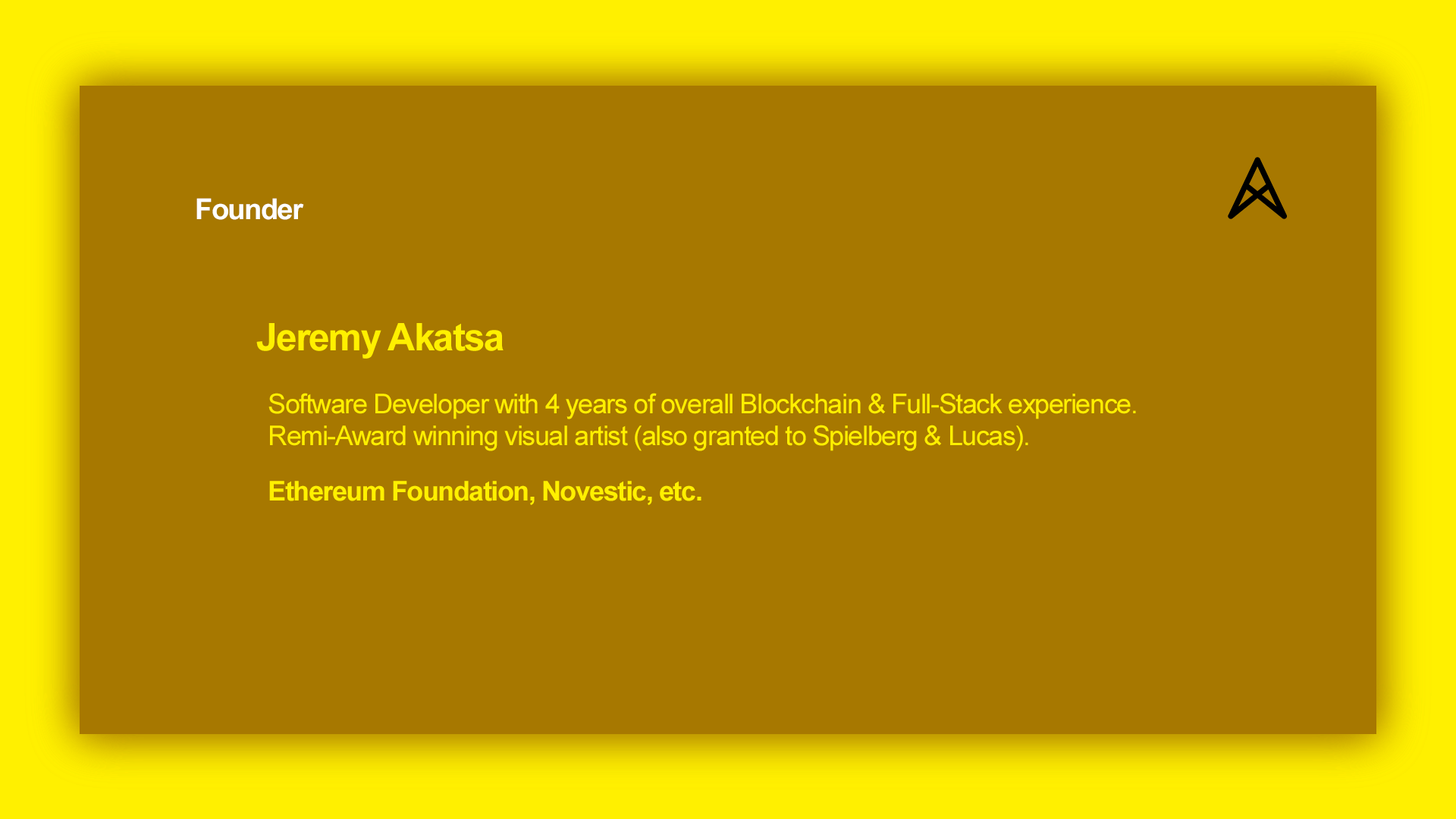
<style>
.page{position:relative;width:1456px;height:819px;background:#a77800}
.page>*{position:absolute;margin:0}
.t1{font:28.8px "Arial-BoldMT";letter-spacing:-0.04em;color:#feffff}
.t2{font:38.1px "Arial-BoldMT";letter-spacing:-0.04em;color:#fff000}
.t3{font:27.3px/31.8px "ArialMT";letter-spacing:-0.04em;color:#ffef00}
.t4{font:27.3px "Arial-BoldMT";letter-spacing:-0.04em;color:#fff000}
</style>
<div class="page">
<p class="t1" style="left:196px;top:198px;width:108px;height:22px">Founder</p>
<p class="t2" style="left:256px;top:323px;width:248px;height:36px">Jeremy Akatsa</p>
<p class="t3" style="left:268px;top:393px;width:868px;height:58px">Software Developer with 4 years of overall Blockchain &amp; Full-Stack experience.<br>Remi-Award winning visual artist (also granted to Spielberg &amp; Lucas).</p>
<p class="t4" style="left:269px;top:481px;width:432px;height:24px">Ethereum Foundation, Novestic, etc.</p>
</div>
